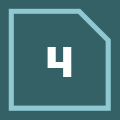
<style>
.page{position:relative;width:120px;height:120px;background:#336166}
.page>*{position:absolute;margin:0}
.t1{font:48px "TransformersMovie";color:#ffffff}
</style>
<div class="page">
<p class="t1" style="left:47px;top:47px;width:25px;height:30px">4</p>
</div>
